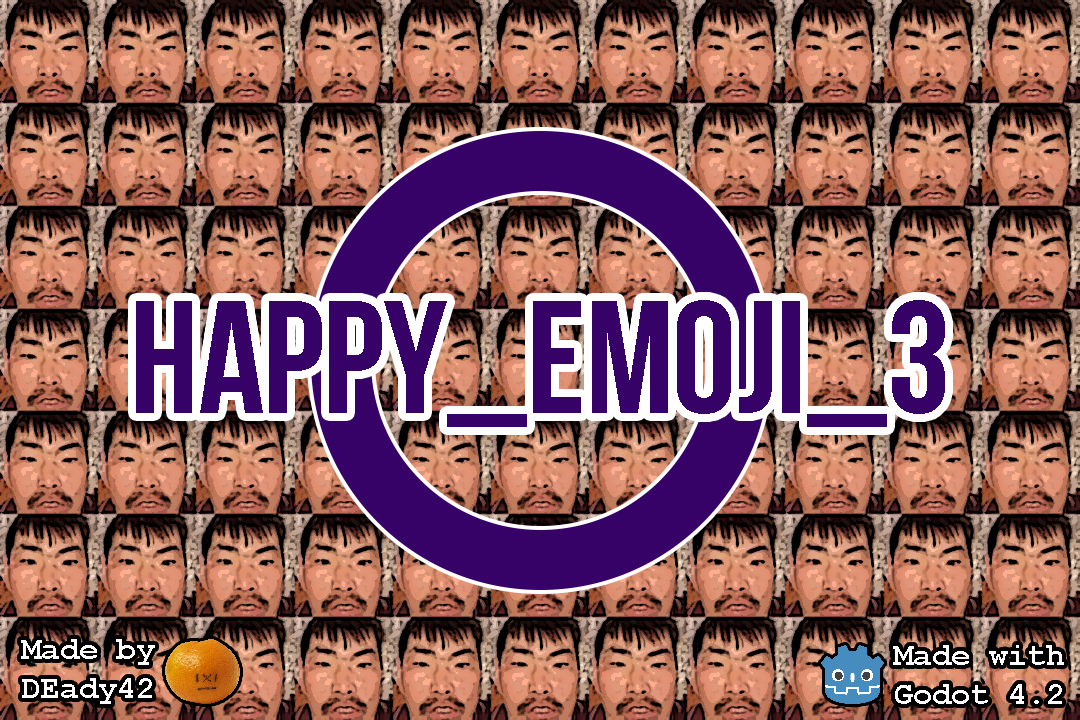
<style>
.page{position:relative;width:1080px;height:720px}
.page>*{position:absolute;margin:0}
.t1{font:160px "BebasNeueBold";color:#370268}
.t2{font:32px "CourierNewPS-BoldMT";color:#ffffff}
</style>
<div class="page">
<p class="t1" style="left:136px;top:300px;width:809px;height:127px">happy_emoji_3</p>
<p class="t2" style="left:21px;top:639px;width:134px;height:65px;text-align:center">Made by<br>DEady42</p>
<p class="t2" style="left:893px;top:645px;width:171px;height:59px;text-align:center">Made with<br>Godot 4.2</p>
</div>
